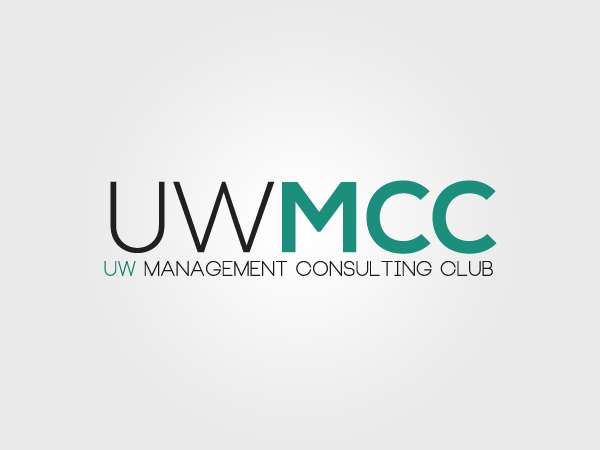
<style>
.page{position:relative;width:600px;height:450px;background:#eaeaea}
.page>*{position:absolute;margin:0}
.t1{font:100px "NexaBold";color:#1b8e7c}
.t2{font:100px "NexaLight";color:#202020}
.t3{font:20px "Neou-Thin";color:#202020;font-weight:bold}
.t4{font:20px "Neou-Thin";color:#1b8e7c;font-weight:bold}
</style>
<div class="page">
<p class="t1" style="left:110px;top:180px;width:387px;height:74px"><span class="t2">UW</span>MCC</p>
<p class="t3" style="left:104px;top:261px;width:389px;height:15px"><span class="t4">UW </span>MANAGEMENT CONSULTING CLUB</p>
</div>
